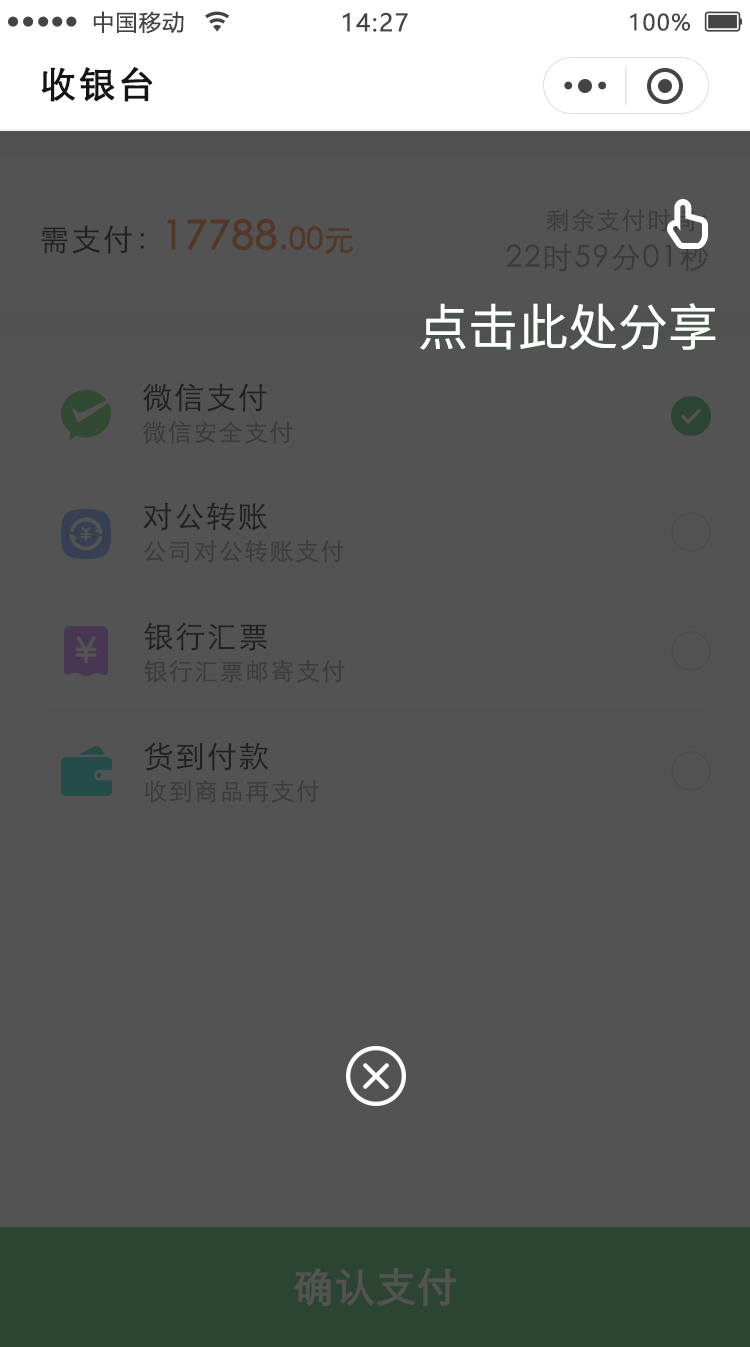
<style>
.page{position:relative;width:750px;height:1347px;background:#535353}
.page>*{position:absolute;margin:0}
.t1{font:22px "MicrosoftYaHei";letter-spacing:0.06em;color:#444444}
.t2{font:24px "MicrosoftYaHei";letter-spacing:0.06em;color:#444444}
.t3{font:36px "STXihei";letter-spacing:0.06em;color:#151515;font-weight:bold}
.t4{font:40px "STXihei";color:#533829;font-weight:bold}
.t5{font:36px "STXihei";color:#533829;font-weight:bold}
.t6{font:30px "STXihei";color:#533829;font-weight:bold}
.t7{font:30px "STXihei";letter-spacing:0.06em;color:#202020}
.t8{font:50px "NotoSansCJKsc-Regular";color:#ffffff}
.t9{font:24px "STXihei";letter-spacing:0.06em;color:#3b3b3b}
.t10{font:40px "STXihei";color:#535353;font-weight:bold}
</style>
<div class="page">
<p class="t1" style="left:93px;top:11px;width:91px;height:23px">中国移动</p>
<p class="t2" style="left:343px;top:12px;width:65px;height:20px">14:27</p>
<p class="t1" style="left:630px;top:13px;width:60px;height:18px">100%</p>
<p class="t3" style="left:41px;top:67px;width:112px;height:35px">收银台</p>
<p class="t4" style="left:167px;top:218px;width:187px;height:36px">17788<span class="t5">.</span><span class="t6">00元</span></p>
<p class="t7" style="left:41px;top:225px;width:103px;height:29px">需支付：</p>
<p class="t8" style="left:420px;top:303px;width:296px;height:47px">点击此处分享</p>
<p class="t7" style="left:143px;top:383px;width:124px;height:29px">微信支付</p>
<p class="t9" style="left:143px;top:421px;width:150px;height:23px">微信安全支付</p>
<p class="t7" style="left:143px;top:502px;width:124px;height:29px">对公转账</p>
<p class="t9" style="left:144px;top:540px;width:200px;height:23px">公司对公转账支付</p>
<p class="t7" style="left:144px;top:622px;width:123px;height:29px">银行汇票</p>
<p class="t9" style="left:144px;top:659px;width:201px;height:24px">银行汇票邮寄支付</p>
<p class="t7" style="left:144px;top:742px;width:125px;height:29px">货到付款</p>
<p class="t9" style="left:144px;top:780px;width:175px;height:23px">收到商品再支付</p>
<p class="t10" style="left:294px;top:1267px;width:162px;height:40px">确认支付</p>
</div>
